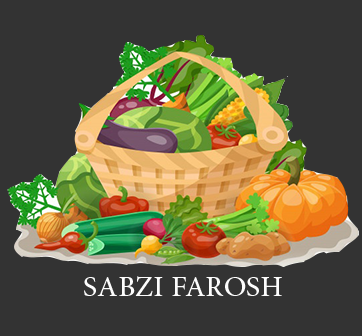
<style>
.page{position:relative;width:362px;height:336px;background:#333333}
.page>*{position:absolute;margin:0}
.t1{font:40px "AdobeArabic-Regular";color:#fdfdfd}
</style>
<div class="page">
<p class="t1" style="left:84px;top:276px;width:198px;height:20px">SABZI FAROSH</p>
</div>
